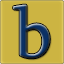
<style>
.page{position:relative;width:64px;height:64px;background:#ccb442}
.page>*{position:absolute;margin:0}
.t1{font:73.5px "Sylfaen";font-weight:bold}
</style>
<div class="page">
<p class="t1" style="left:13px;top:4px;width:37px;height:55px">b</p>
</div>
